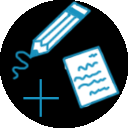
<style>
.page{position:relative;width:128px;height:128px;background:#000000}
.page>*{position:absolute;margin:0}
.t1{font:72px "Roboto-Thin";color:#1892bf}
</style>
<div class="page">
<p class="t1" style="left:23px;top:79px;width:36px;height:38px">+</p>
</div>
